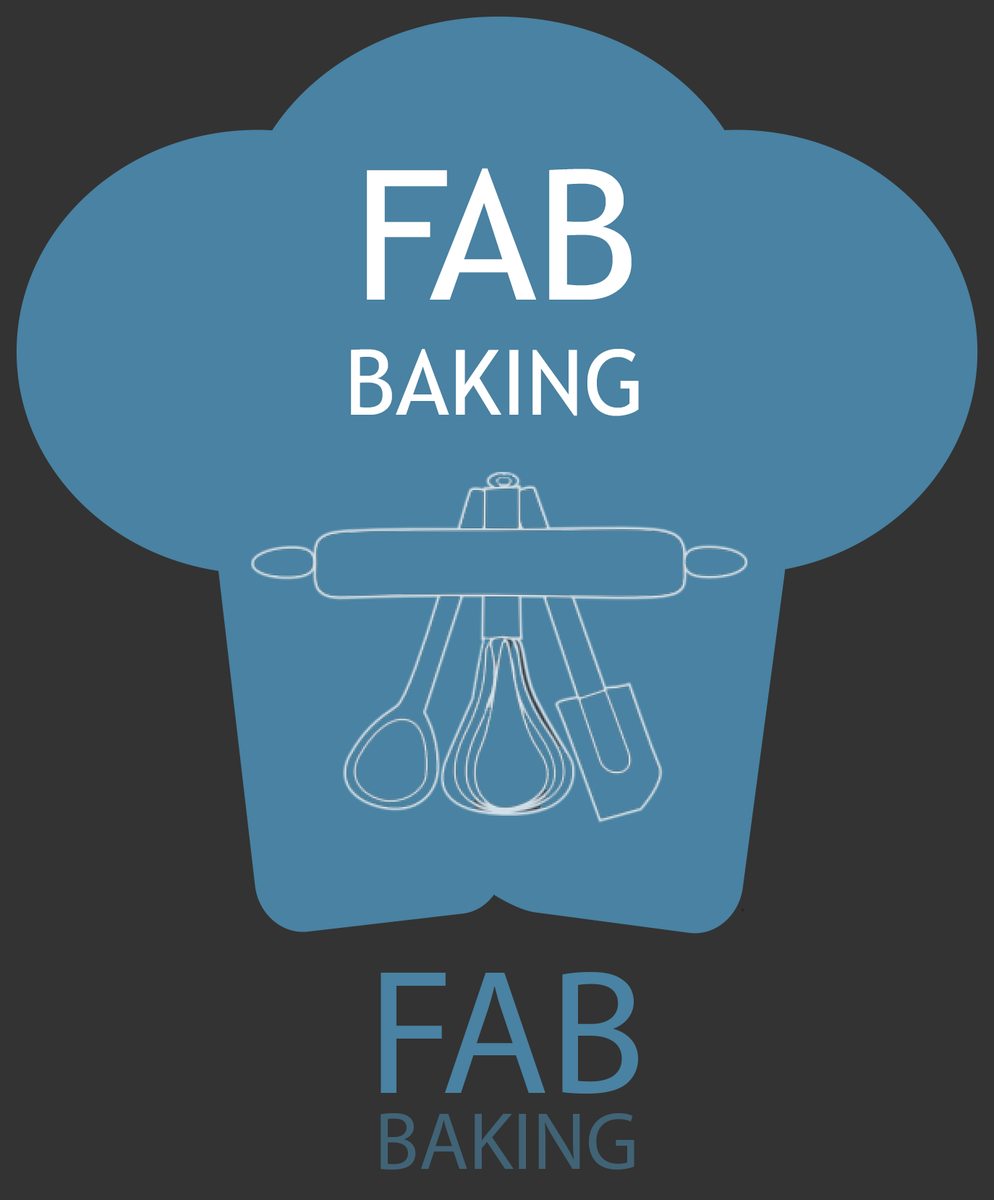
<style>
.page{position:relative;width:994px;height:1200px;background:#333333}
.page>*{position:absolute;margin:0}
.t1{font:180.9px "TrebuchetMS";color:#ffffff}
.t2{font:90.4px "TrebuchetMS";color:#ffffff}
</style>
<div class="page">
<p class="t1" style="left:367px;top:168px;width:265px;height:132px">FAB</p>
<p class="t2" style="left:351px;top:349px;width:288px;height:67px">BAKING</p>
</div>
